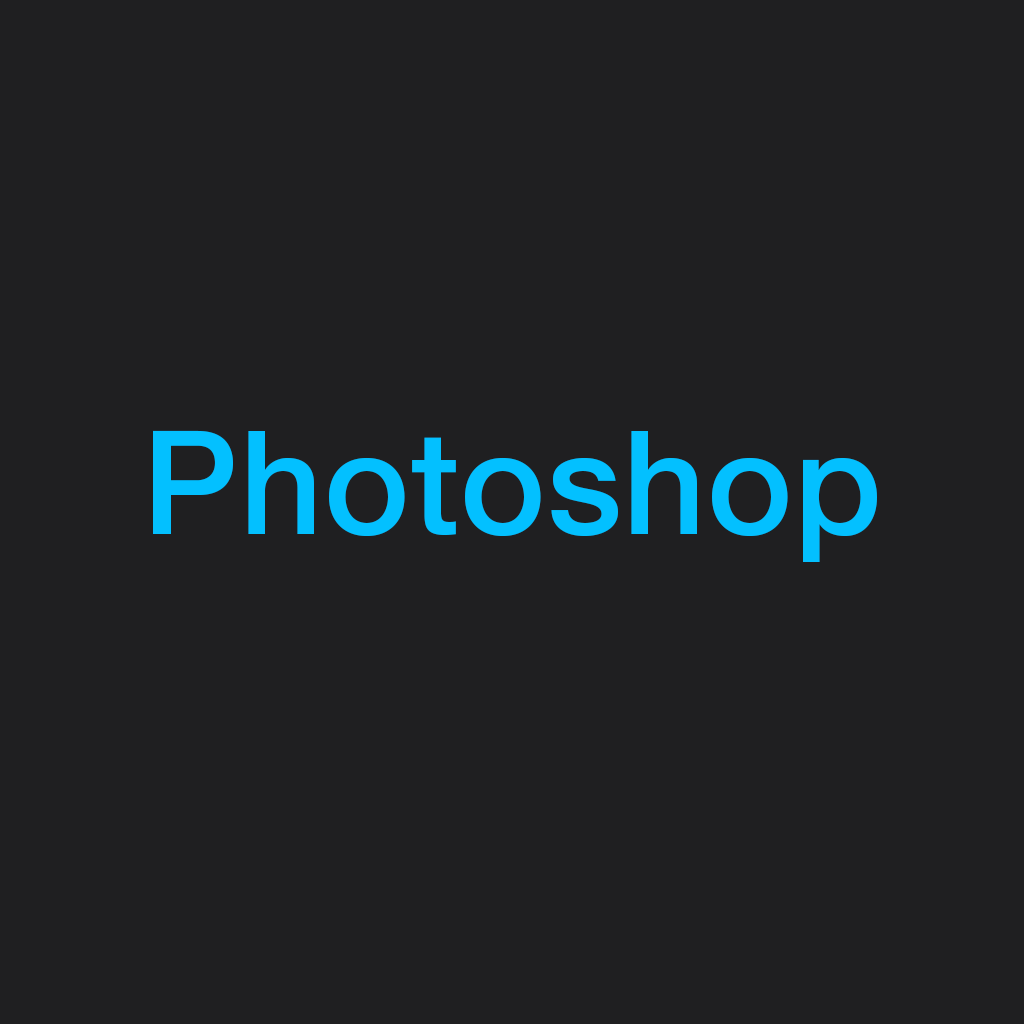
<style>
.page{position:relative;width:1024px;height:1024px;background:#1f1f21}
.page>*{position:absolute;margin:0}
.t1{font:144px "HelveticaNeue-Medium";letter-spacing:0.01em;color:#03c0ff}
</style>
<div class="page">
<p class="t1" style="left:153px;top:430px;width:724px;height:132px">Photoshop</p>
</div>
